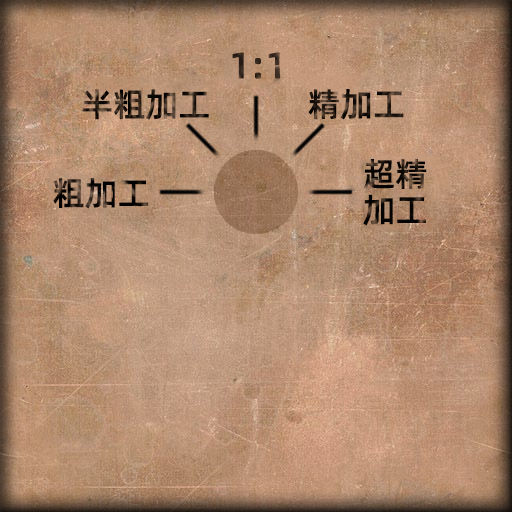
<style>
.page{position:relative;width:512px;height:512px}
.page>*{position:absolute;margin:0}
.t1{font:37px "AlibabaPuHuiTiM";color:#3a2c21}
.t2{font:33px "AlibabaPuHuiTiM"}
.t3{font:33px/36px "AlibabaPuHuiTiM";color:#000000}
</style>
<div class="page">
<p class="t1" style="left:232px;top:52px;width:48px;height:27px">1:1</p>
<p class="t2" style="left:82px;top:89px;width:127px;height:31px">半粗加工</p>
<p class="t2" style="left:308px;top:89px;width:96px;height:31px">精加工</p>
<p class="t3" style="left:363px;top:159px;width:64px;height:67px">超精<br>加工</p>
<p class="t2" style="left:53px;top:178px;width:96px;height:31px">粗加工</p>
</div>
